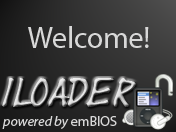
<style>
.page{position:relative;width:176px;height:132px}
.page>*{position:absolute;margin:0}
.t1{font:30px "MyriadPro-Regular";color:#d8d8d8}
.t2{font:30px "Yearsupplyoffairycakes"}
.t3{font:14px "MyriadPro-It";color:#d8d8d8}
.t4{font:14px "MyriadPro-Regular";color:#d8d8d8}
</style>
<div class="page">
<p class="t1" style="left:28px;top:26px;width:121px;height:22px">Welcome!</p>
<p class="t2" style="left:2px;top:78px;width:134px;height:29px">iLoader</p>
<p class="t3" style="left:2px;top:116px;width:115px;height:13px">powered by<span class="t4"> emBIOS</span></p>
</div>
